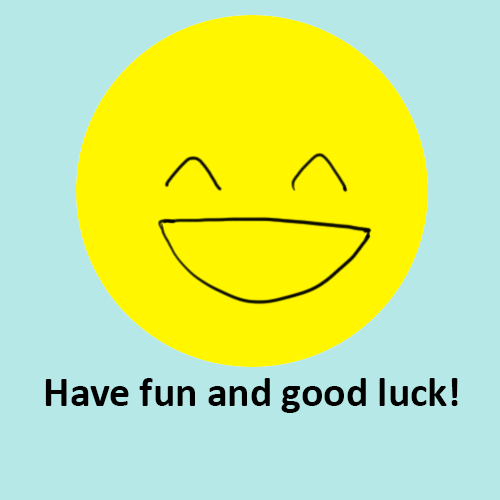
<style>
.page{position:relative;width:500px;height:500px;background:#b6e8e7}
.page>*{position:absolute;margin:0}
.t1{font:41.7px "Calibri-Bold";color:#000000}
</style>
<div class="page">
<p class="t1" style="left:45px;top:378px;width:413px;height:35px">Have fun and good luck!</p>
</div>
